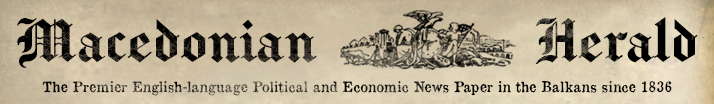
<style>
.page{position:relative;width:714px;height:104px}
.page>*{position:absolute;margin:0}
.t1{font:58px "Chomsky";color:#000000}
.t2{font:14px "OldNewspaperTypes"}
</style>
<div class="page">
<p class="t1" style="left:17px;top:17px;width:681px;height:51px">Macedonian               Herald</p>
<p class="t2" style="left:42px;top:81px;width:630px;height:15px">The Premier English-language Political and Economic News Paper in the Balkans since 1836</p>
</div>
